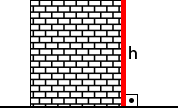
<style>
.page{position:relative;width:178px;height:108px;background:#ffffff}
.page>*{position:absolute;margin:0}
.t1{font:18px "MyriadPro-Regular";color:#000000}
</style>
<div class="page">
<p class="t1" style="left:129px;top:46px;width:8px;height:13px">h</p>
</div>
